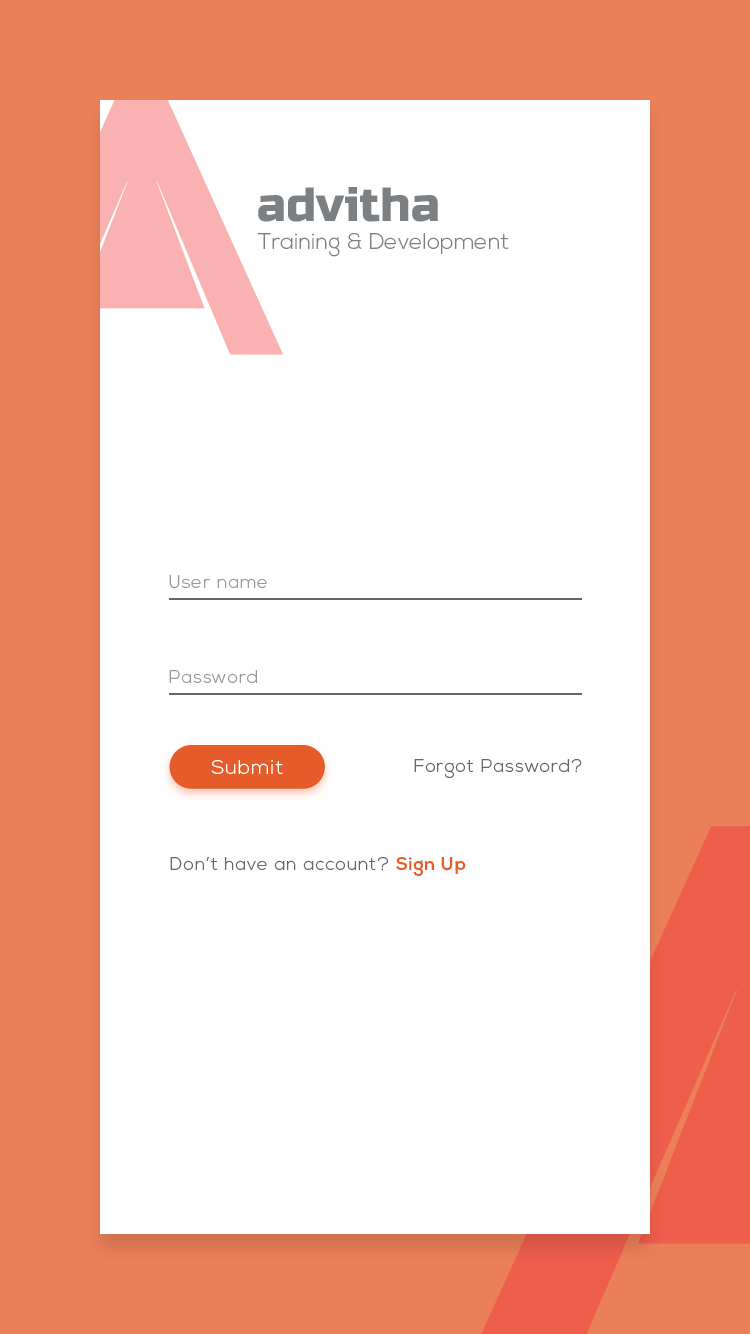
<style>
.page{position:relative;width:750px;height:1334px;background:#ffffff}
.page>*{position:absolute;margin:0}
.t1{font:48px "RussoOne-Regular";color:#7d8083}
.t2{font:22.4px "NexaLight";color:#7d8083}
.t3{font:18px "NexaLight";letter-spacing:0.05em;color:#999999}
.t4{font:20px "NexaLight";letter-spacing:0.05em;color:#ffffff}
.t5{font:18px "NexaLight";letter-spacing:0.05em;color:#666666}
.t6{font:18px "NexaBold";letter-spacing:0.05em;color:#e55c2a}
</style>
<div class="page">
<p class="t1" style="left:258px;top:187px;width:180px;height:35px">advitha</p>
<p class="t2" style="left:257px;top:233px;width:252px;height:24px">Training &amp; Development</p>
<p class="t3" style="left:169px;top:575px;width:98px;height:13px">User name</p>
<p class="t3" style="left:169px;top:670px;width:88px;height:13px">Password</p>
<p class="t4" style="left:211px;top:760px;width:72px;height:14px">Submit</p>
<p class="t5" style="left:414px;top:759px;width:168px;height:19px">Forgot Password?</p>
<p class="t5" style="left:170px;top:857px;width:296px;height:19px">Don’t have an account? <span class="t6">Sign Up</span></p>
</div>
